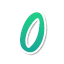
<style>
.page{position:relative;width:64px;height:64px;background:#ffffff}
.page>*{position:absolute;margin:0}
.t1{font:72px "MaroonedOnMarsBB";color:#1cbb90}
</style>
<div class="page">
<p class="t1" style="left:20px;top:12px;width:25px;height:41px">0</p>
</div>
